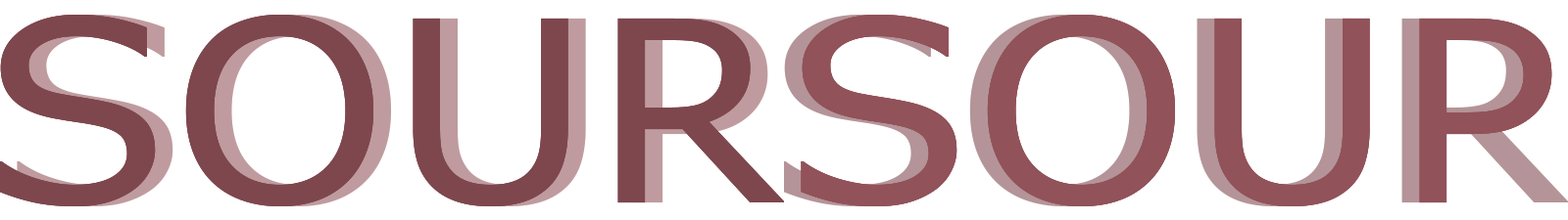
<style>
.page{position:relative;width:1568px;height:220px;background:#ffffff}
.page>*{position:absolute;margin:0}
.t1{font:254.1px "MSReferenceSansSerif";color:#7d474d;scale:1.09 1}
.t2{font:254.1px "MSReferenceSansSerif";scale:1.09 1}
.t3{font:254.1px "MSReferenceSansSerif";color:#915259;scale:1.09 1}
</style>
<div class="page">
<p class="t1" style="left:0px;top:14px;width:784px;height:193px">SOUR</p>
<p class="t1" style="left:0px;top:14px;width:784px;height:193px">SOUR</p>
<p class="t1" style="left:0px;top:14px;width:784px;height:193px;opacity:0.68">SOUR</p>
<p class="t2" style="left:17px;top:14px;width:751px;height:193px">SOUP</p>
<p class="t2" style="left:17px;top:14px;width:751px;height:193px">SOUP</p>
<p class="t2" style="left:17px;top:14px;width:751px;height:193px">SOUP</p>
<p class="t2" style="left:784px;top:14px;width:784px;height:193px">SOUR</p>
<p class="t2" style="left:784px;top:14px;width:784px;height:193px">SOUR</p>
<p class="t2" style="left:784px;top:14px;width:784px;height:193px">SOUR</p>
<p class="t3" style="left:801px;top:14px;width:751px;height:193px">SOUP</p>
<p class="t3" style="left:801px;top:14px;width:751px;height:193px">SOUP</p>
<p class="t3" style="left:801px;top:14px;width:751px;height:193px">SOUP</p>
</div>
